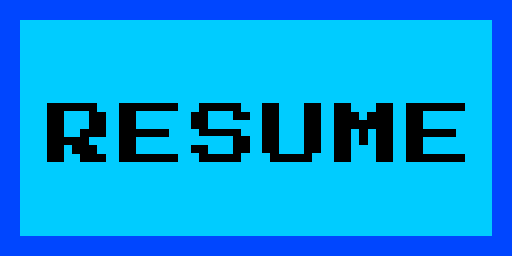
<style>
.page{position:relative;width:512px;height:256px;background:#00ccff}
.page>*{position:absolute;margin:0}
.t1{font:66.7px "PressStart2P-Regular";letter-spacing:0.075em;color:#000000}
</style>
<div class="page">
<p class="t1" style="left:47px;top:103px;width:418px;height:59px">RESUME</p>
</div>
